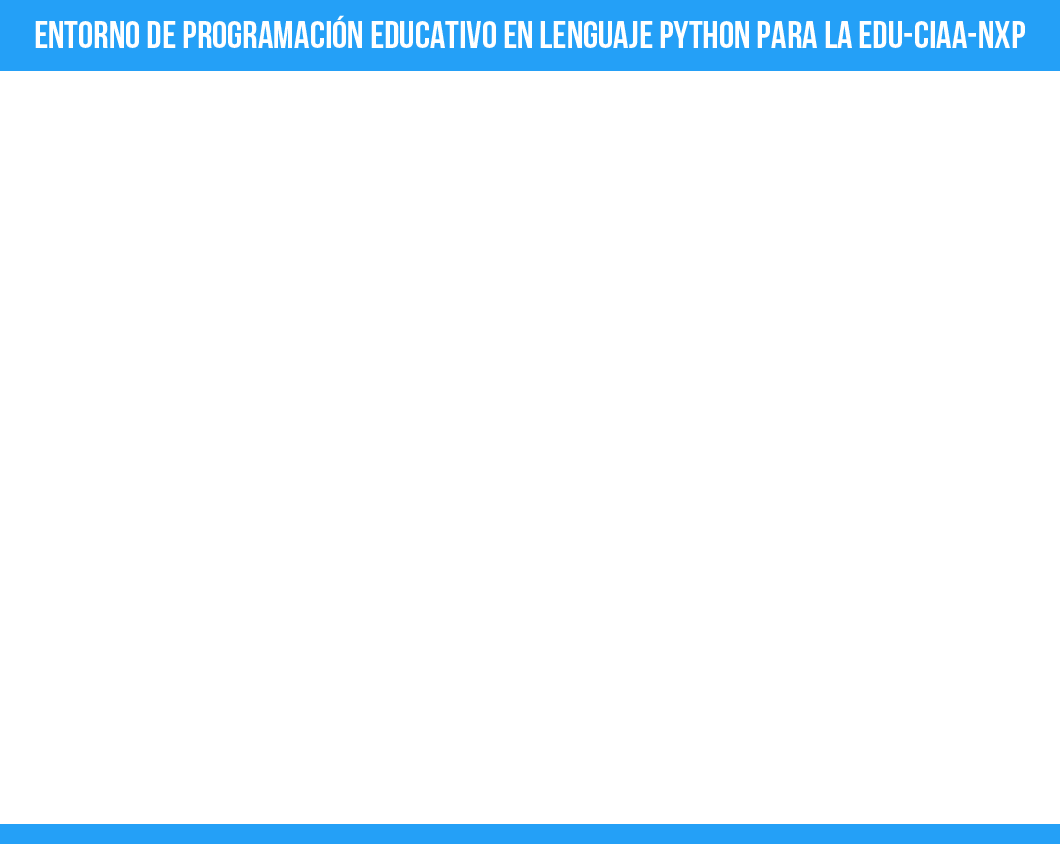
<style>
.page{position:relative;width:1060px;height:844px;background:#ffffff}
.page>*{position:absolute;margin:0}
.t1{font:38.5px "BebasNeue";color:#ffffff}
</style>
<div class="page">
<p class="t1" style="left:35px;top:15px;width:990px;height:33px">Entorno de programación educativo en lenguaje Python para la EDU-CIAA-NXP</p>
</div>
